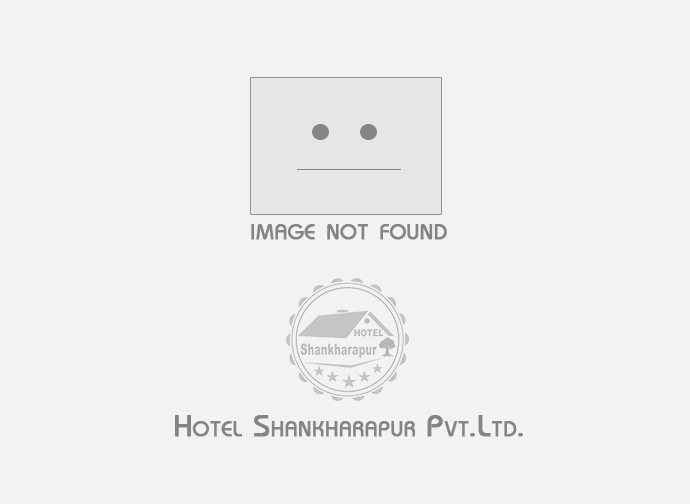
<style>
.page{position:relative;width:690px;height:504px;background:#f2f2f2}
.page>*{position:absolute;margin:0}
.t1{font:32px "Bauhaus-Regular";color:#848484;font-variant:small-caps;font-weight:bold}
</style>
<div class="page">
<p class="t1" style="left:251px;top:224px;width:196px;height:16px">image not found</p>
<p class="t1" style="left:175px;top:415px;width:348px;height:22px">Hotel Shankharapur Pvt.Ltd.</p>
</div>
